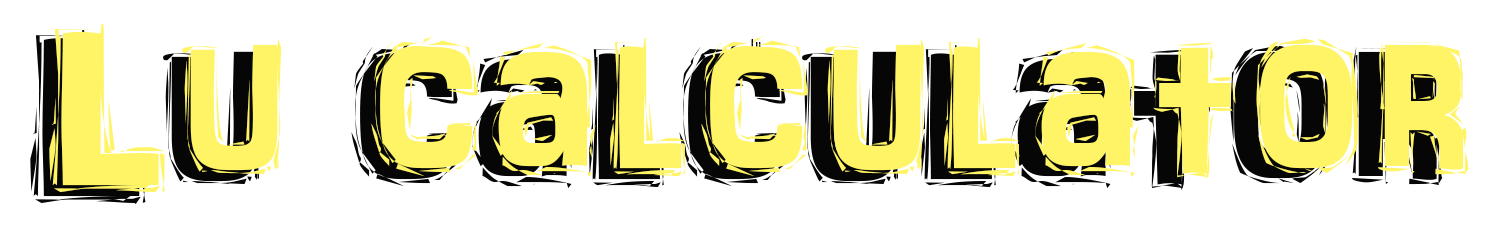
<style>
.page{position:relative;width:1496px;height:225px;background:#ffffff}
.page>*{position:absolute;margin:0}
.t1{font:240.1px "ARDARLING"}
.t2{font:233.2px "ARDARLING";color:#fff466;scale:1.03 1}
.t3{font:14px "MyriadPro-Cond"}
</style>
<div class="page">
<p class="t1" style="left:30px;top:29px;width:1413px;height:175px">Lu calculator</p>
<p class="t2" style="left:49px;top:23px;width:1420px;height:169px">Lu calculator</p>
<p class="t3" style="left:751px;top:39px;width:10px;height:10px">Lu</p>
</div>
